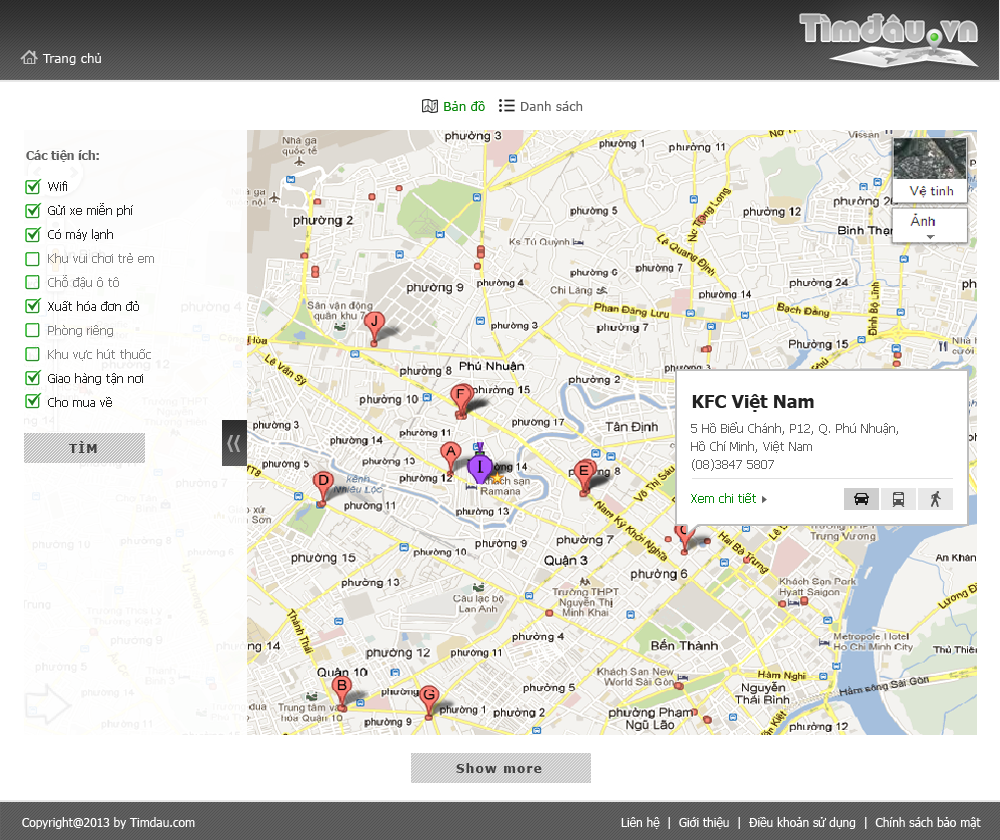
<style>
.page{position:relative;width:1000px;height:840px;background:#ffffff}
.page>*{position:absolute;margin:0}
.t1{font:12px "Verdana";color:#ffffff}
.t2{font:12px "Tahoma-Bold";color:#606060}
.t3{font:12px/24px "Tahoma";color:#232222}
.t4{font:12px/24px "Tahoma";color:#808080}
.t5{font:12px/24px "Tahoma";color:#222222}
.t6{font:18px "Tahoma-Bold";color:#222222}
.t7{font:12px/18px "Tahoma";color:#606060}
.t8{font:12px "Tahoma";color:#07880a}
.t9{font:12px "Verdana-Bold";letter-spacing:0.1em;color:#404040}
.t10{font:12px "Tahoma";color:#ffffff}
</style>
<div class="page">
<p class="t1" style="left:42px;top:53px;width:59px;height:12px">Trang chủ</p>
<p class="t2" style="left:26px;top:150px;width:73px;height:12px">Các tiện ích:</p>
<p class="t3" style="left:48px;top:181px;width:106px;height:226px">Wifi<br>Gửi xe miễn phí<br>Có máy lạnh<br><span class="t4">Khu vui chơi trẻ em<br>Chỗ đậu ô tô<br></span><span class="t5">Xuất hóa đơn đỏ<br></span><span class="t4">Phòng riêng<br>Khu vực hút thuốc<br></span><span class="t5">Giao hàng tận nơi<br>Cho mua về</span></p>
<p class="t6" style="left:692px;top:394px;width:122px;height:18px">KFC Việt Nam</p>
<p class="t7" style="left:691px;top:422px;width:207px;height:81px">5 Hồ Biểu Chánh, P12, Q. Phú Nhuận, <br>Hồ Chí Minh, Việt Nam<br>(08)3847 5807<br>  <br><span class="t8">Xem chi tiết</span></p>
<p class="t9" style="left:69px;top:441px;width:28px;height:12px">TÌM</p>
<p class="t9" style="left:456px;top:763px;width:86px;height:10px">Show more</p>
<p class="t10" style="left:22px;top:817px;width:173px;height:12px">Copyright@2013 by Timdau.com</p>
<p class="t10" style="left:621px;top:817px;width:360px;height:12px">Liên hệ  |  Giới thiệu  |  Điều khoản sử dụng  |  Chính sách bảo mật</p>
</div>
